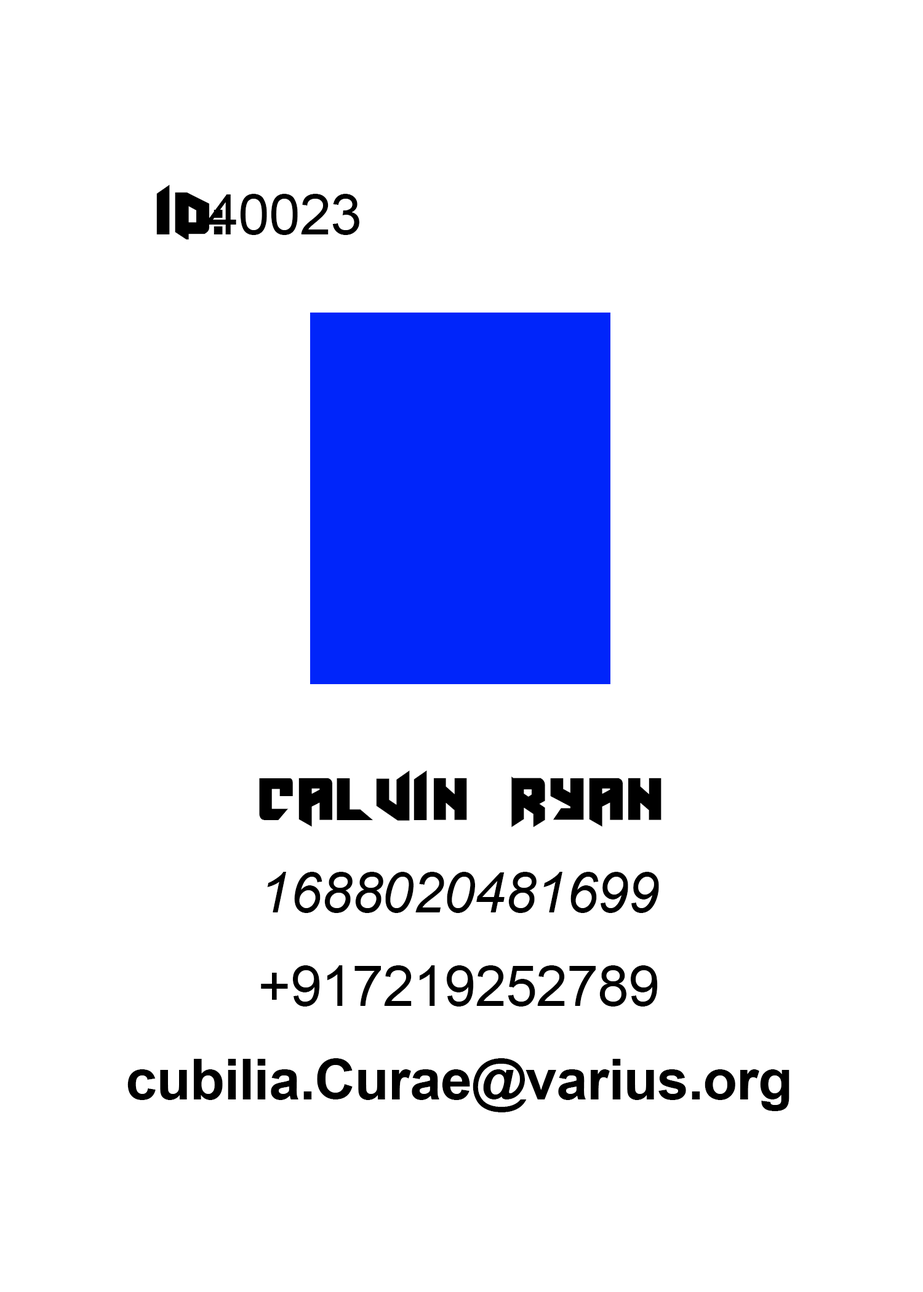
<style>
.page{position:relative;width:923px;height:1292px;background:#ffffff}
.page>*{position:absolute;margin:0}
.t1{font:56.8px "AmazObitaemOstrovBold";letter-spacing:-0.015em;color:#000000}
.t2{font:56.8px "ArialMT";letter-spacing:-0.015em;color:#000000}
.t3{font:56.8px "Arial-ItalicMT";letter-spacing:-0.015em;color:#000000}
.t4{font:56.8px "Arial-BoldMT";letter-spacing:-0.015em;color:#000000}
</style>
<div class="page">
<p class="t1" style="left:156px;top:185px;width:67px;height:55px">id:</p>
<p class="t2" style="left:208px;top:194px;width:151px;height:41px">40023</p>
<p class="t1" style="left:259px;top:770px;width:402px;height:58px">Calvin Ryan</p>
<p class="t3" style="left:267px;top:872px;width:392px;height:41px">1688020481699</p>
<p class="t2" style="left:261px;top:965px;width:397px;height:42px">+917219252789</p>
<p class="t4" style="left:127px;top:1058px;width:662px;height:54px">cubilia.Curae@varius.org</p>
</div>
